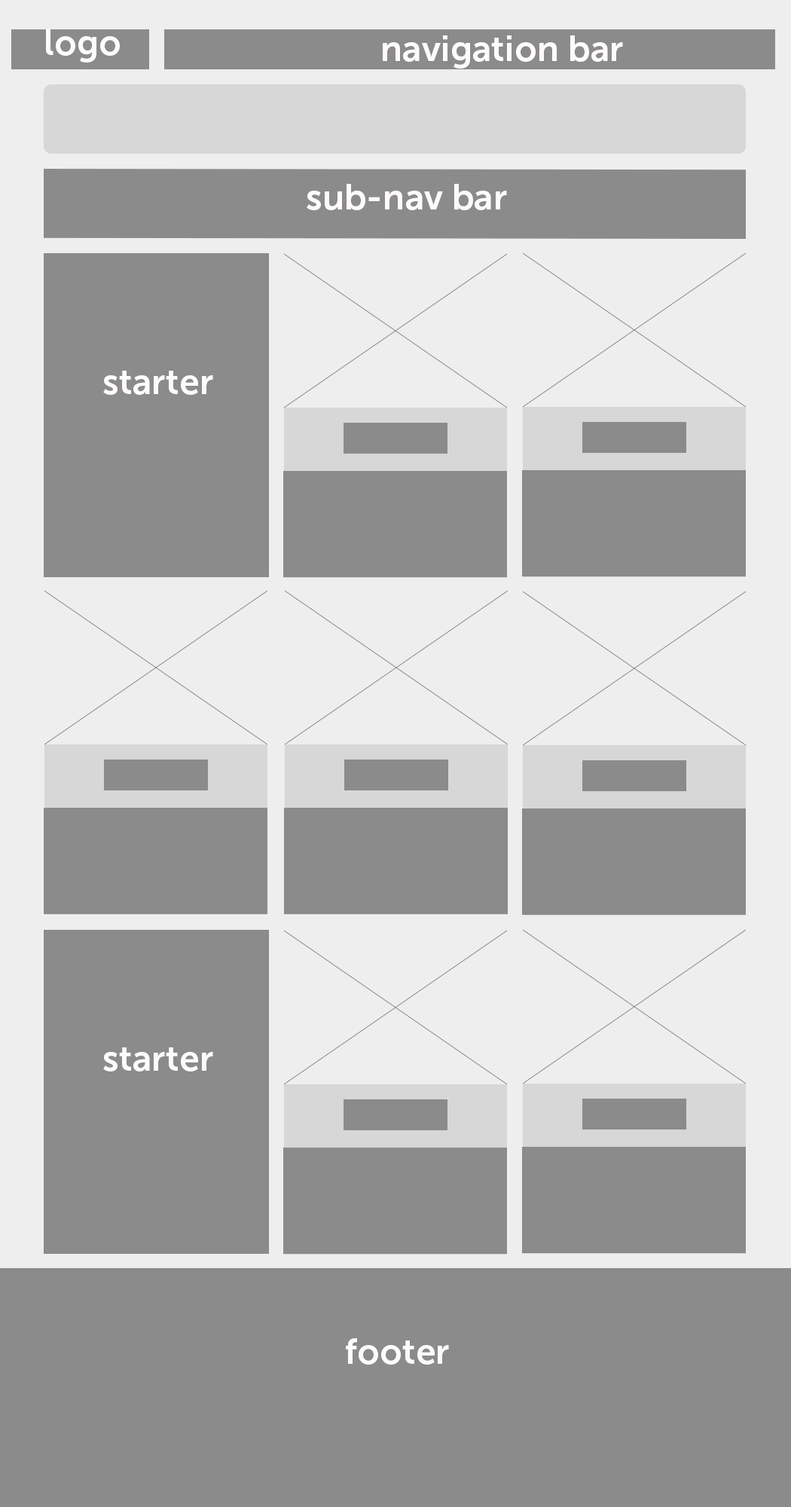
<style>
.page{position:relative;width:791px;height:1507px;background:#8b8b8b}
.page>*{position:absolute;margin:0}
.t1{font:36.2px "MuseoSans-700";color:#fffbfb}
</style>
<div class="page">
<p class="t1" style="left:46px;top:29px;width:74px;height:34px">logo</p>
<p class="t1" style="left:383px;top:35px;width:240px;height:34px">navigation bar</p>
<p class="t1" style="left:307px;top:184px;width:200px;height:26px">sub-nav bar</p>
<p class="t1" style="left:103px;top:371px;width:110px;height:24px">starter</p>
<p class="t1" style="left:103px;top:1047px;width:110px;height:25px">starter</p>
<p class="t1" style="left:346px;top:1338px;width:103px;height:27px">footer</p>
</div>
